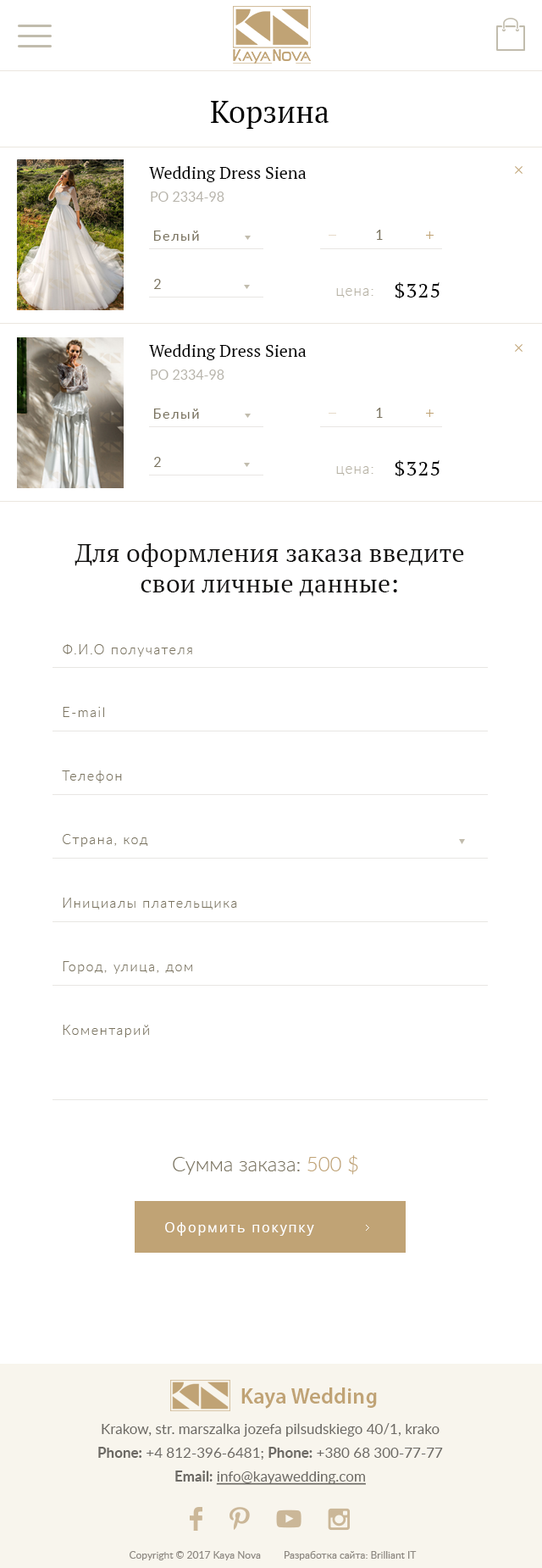
<style>
.page{position:relative;width:542px;height:1568px;background:#ffffff}
.page>*{position:absolute;margin:0}
.t1{font:30.5px "PTSerif-Regular";color:#010101}
.t2{font:17px "PTSerif-Regular";color:#010101}
.t3{font:13.6px "Lato-Regular";color:#b7b4ab;text-transform:uppercase}
.t4{font:13.6px "Lato-Regular";letter-spacing:0.1em;color:#7b7460}
.t5{font:13.6px "Lato-Regular";letter-spacing:0.1em;color:#7b7460;text-transform:uppercase}
.t6{font:14.4px "Lato-Light";letter-spacing:0.07em;color:#b6b1a3}
.t7{font:20.3px "PTSerif-Regular";letter-spacing:0.05em;color:#000000}
.t8{font:25.4px "PTSerif-Regular";color:#121110}
.t9{font:13.6px "Lato-Light";letter-spacing:0.1em;color:#7b7460}
.t10{font:13.6px "Lato-Light";letter-spacing:0.1em;color:#7b7460;text-transform:uppercase}
.t11{font:20.3px "Lato-Light";color:#7b7460}
.t12{font:20.3px "Lato-Light";color:#c0a375}
.t13{font:13.6px "OpenSans";letter-spacing:0.1em;color:#ffffff}
.t14{font:22px "MyriadPro-Semibold";letter-spacing:0.01em;color:#c0a375}
.t15{font:14.4px/23.7px "Lato-Regular";color:#6c6964}
.t16{font:14.4px/23.7px "Lato-Bold";color:#6c6964}
.t17{font:14.4px/23.7px "Lato-Regular";color:#6c6964;text-decoration:underline}
.t18{font:10.2px "Lato-Regular";color:#8d8881}
</style>
<div class="page">
<p class="t1" style="left:211px;top:101px;width:119px;height:28px">Корзина</p>
<p class="t2" style="left:149px;top:166px;width:158px;height:16px">Wedding Dress Siena</p>
<p class="t3" style="left:151px;top:192px;width:74px;height:10px">РО 2334-98</p>
<p class="t4" style="left:153px;top:231px;width:46px;height:10px">Белый</p>
<p class="t5" style="left:376px;top:230px;width:7px;height:10px">1</p>
<p class="t5" style="left:154px;top:279px;width:7px;height:10px">2</p>
<p class="t6" style="left:336px;top:288px;width:38px;height:9px">цена:</p>
<p class="t7" style="left:395px;top:282px;width:45px;height:16px">$325</p>
<p class="t2" style="left:149px;top:344px;width:158px;height:16px">Wedding Dress Siena</p>
<p class="t3" style="left:151px;top:370px;width:74px;height:10px">РО 2334-98</p>
<p class="t4" style="left:153px;top:409px;width:46px;height:10px">Белый</p>
<p class="t5" style="left:376px;top:408px;width:7px;height:10px">1</p>
<p class="t5" style="left:154px;top:457px;width:7px;height:10px">2</p>
<p class="t7" style="left:395px;top:460px;width:45px;height:16px">$325</p>
<p class="t6" style="left:336px;top:466px;width:38px;height:9px">цена:</p>
<p class="t8" style="left:75px;top:543px;width:389px;height:54px;text-align:center">Для оформления заказа введите<br>свои личные данные:</p>
<p class="t9" style="left:63px;top:644px;width:129px;height:13px"><span class="t10">Ф.и.о</span> получателя</p>
<p class="t9" style="left:63px;top:707px;width:41px;height:10px">E-mail</p>
<p class="t9" style="left:62px;top:770px;width:60px;height:13px">Телефон</p>
<p class="t9" style="left:63px;top:834px;width:85px;height:13px">Страна, код</p>
<p class="t9" style="left:63px;top:898px;width:174px;height:11px">Инициалы плательщика</p>
<p class="t9" style="left:63px;top:961px;width:129px;height:13px">Город, улица, дом</p>
<p class="t9" style="left:63px;top:1025px;width:86px;height:12px">Коментарий</p>
<p class="t11" style="left:173px;top:1155px;width:186px;height:20px">Сумма заказа: <span class="t12">500 $</span></p>
<p class="t13" style="left:165px;top:1222px;width:149px;height:14px">Оформить покупку</p>
<p class="t14" style="left:242px;top:1387px;width:135px;height:22px">Kaya Wedding</p>
<p class="t15" style="left:98px;top:1423px;width:345px;height:62px;text-align:center">Krakow, str. marszalka jozefa pilsudskiego 40/1, krako<br><span class="t16">Phone:</span> +4 812-396-6481; <span class="t16">Phone:</span> +380 68 300-77-77<br><span class="t16">Email: </span><span class="t17">info@kayawedding.com</span></p>
<p class="t18" style="left:130px;top:1551px;width:131px;height:9px">Copyright © 2017 Kaya Nova</p>
<p class="t18" style="left:285px;top:1551px;width:132px;height:9px">Разработка сайта: Brilliant IT</p>
</div>
